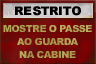
<style>
.page{position:relative;width:96px;height:64px}
.page>*{position:absolute;margin:0}
.t1{font:9.7px/13px "Arial-Black";letter-spacing:-0.04em;color:#b6aa5b;text-transform:uppercase}
</style>
<div class="page">
<p class="t1" style="left:3px;top:25px;width:89px;height:33px;text-align:center">MOSTRE O PASSE<br>AO GUARDA<br>NA CABINE</p>
</div>
